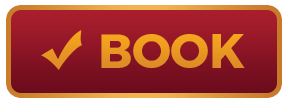
<style>
.page{position:relative;width:287px;height:103px}
.page>*{position:absolute;margin:0}
.t1{font:48px "Montserrat-Bold";color:#e99822}
</style>
<div class="page">
<p class="t1" style="left:101px;top:34px;width:144px;height:34px">BOOK</p>
</div>
